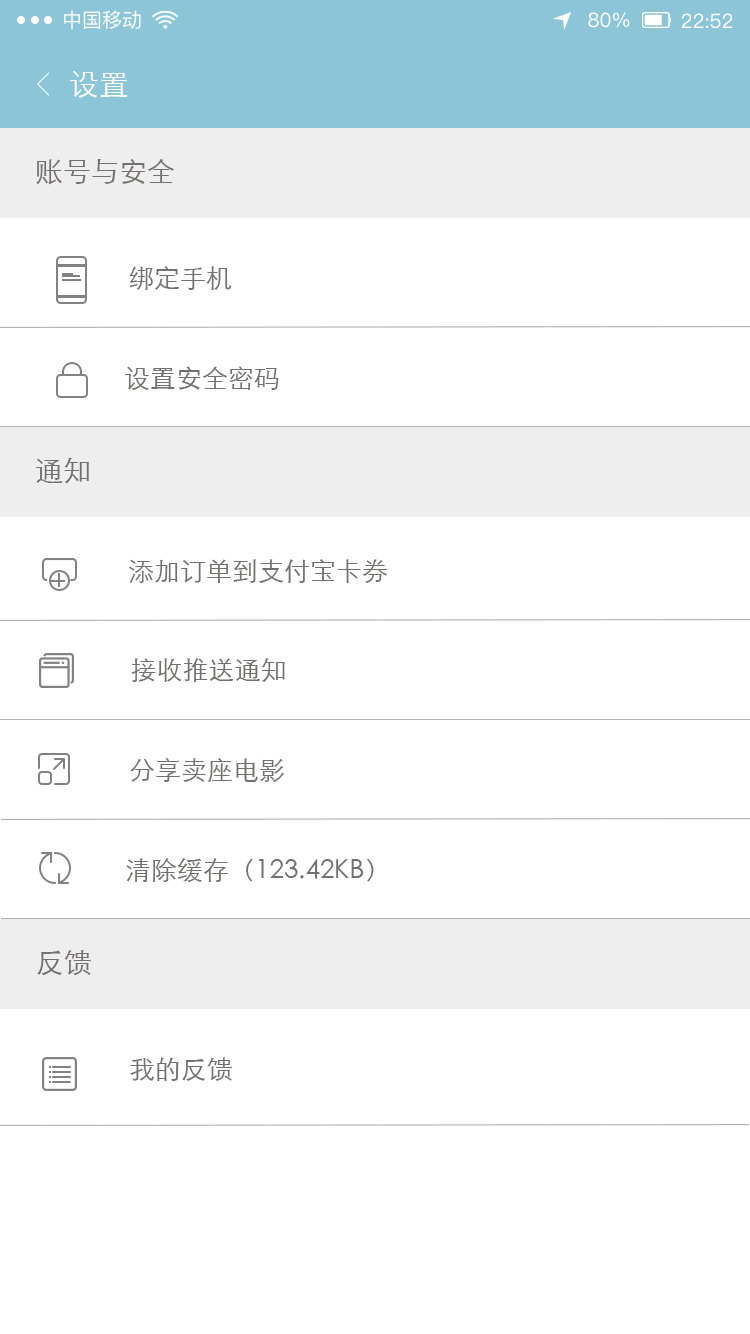
<style>
.page{position:relative;width:750px;height:1334px;background:#ffffff}
.page>*{position:absolute;margin:0}
.t1{font:20px "PingFangSC-Regular";color:#ffffff}
.t2{font:30px "STXihei";color:#ffffff}
.t3{font:28px "STXihei";color:#757070}
.t4{font:26px "STXihei";color:#757070}
</style>
<div class="page">
<p class="t1" style="left:64px;top:10px;width:77px;height:20px">中国移动</p>
<p class="t1" style="left:588px;top:12px;width:42px;height:16px">80%</p>
<p class="t1" style="left:681px;top:13px;width:52px;height:16px">22:52</p>
<p class="t2" style="left:70px;top:70px;width:58px;height:28px">设置</p>
<p class="t3" style="left:36px;top:159px;width:138px;height:26px">账号与安全</p>
<p class="t4" style="left:129px;top:266px;width:103px;height:24px">绑定手机</p>
<p class="t4" style="left:125px;top:366px;width:154px;height:24px">设置安全密码</p>
<p class="t3" style="left:36px;top:457px;width:53px;height:27px">通知</p>
<p class="t4" style="left:129px;top:559px;width:258px;height:24px">添加订单到支付宝卡券</p>
<p class="t4" style="left:131px;top:658px;width:154px;height:24px">接收推送通知</p>
<p class="t4" style="left:130px;top:758px;width:154px;height:24px">分享卖座电影</p>
<p class="t4" style="left:126px;top:858px;width:248px;height:25px">清除缓存（123.42KB）</p>
<p class="t3" style="left:37px;top:950px;width:54px;height:25px">反馈</p>
<p class="t4" style="left:130px;top:1057px;width:102px;height:24px">我的反馈</p>
</div>
